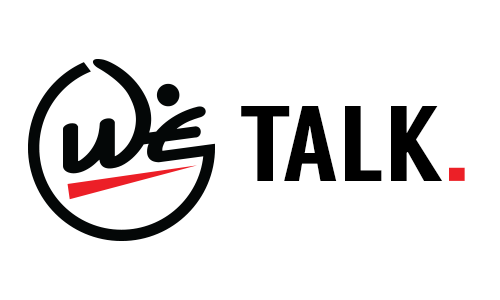
<style>
.page{position:relative;width:500px;height:300px;background:#ffffff}
.page>*{position:absolute;margin:0}
.t1{font:106.8px "Langdon";color:#000000;text-transform:uppercase;scale:1.18 1}
.t2{font:106.8px "Langdon";color:#ec2027;text-transform:uppercase;scale:1.18 1}
</style>
<div class="page">
<p class="t1" style="left:241px;top:106px;width:224px;height:75px">talk<span class="t2">.</span></p>
</div>
